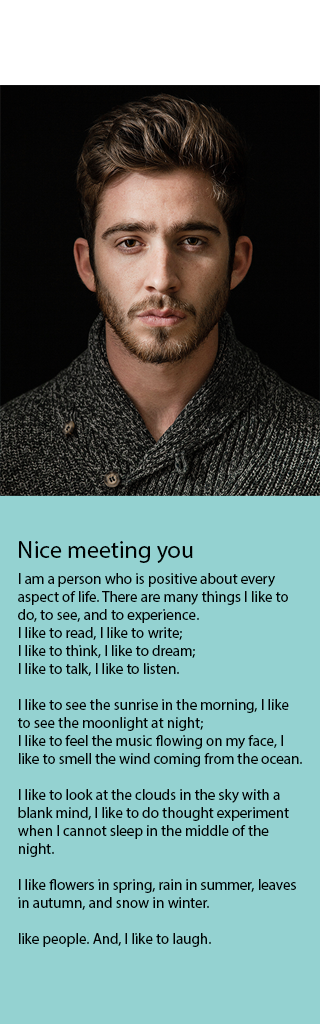
<style>
.page{position:relative;width:320px;height:1024px;background:#94d2d1}
.page>*{position:absolute;margin:0}
.t1{font:24px "MyriadPro-Regular";color:#000303}
.t2{font:15px "MyriadPro-Regular";color:#000303}
</style>
<div class="page">
<p class="t1" style="left:19px;top:541px;width:174px;height:22px">Nice meeting you</p>
<p class="t2" style="left:17px;top:573px;width:285px;height:374px">I am a person who is positive about every aspect of life. There are many things I like to do, to see, and to experience. <br>I like to read, I like to write; <br>I like to think, I like to dream; <br>I like to talk, I like to listen. <br><br>I like to see the sunrise in the morning, I like to see the moonlight at night; <br>I like to feel the music flowing on my face, I like to smell the wind coming from the ocean. <br><br>I like to look at the clouds in the sky with a blank mind, I like to do thought experiment when I cannot sleep in the middle of the night. <br><br>I like flowers in spring, rain in summer, leaves in autumn, and snow in winter. <br><br>like people. And, I like to laugh.</p>
</div>
